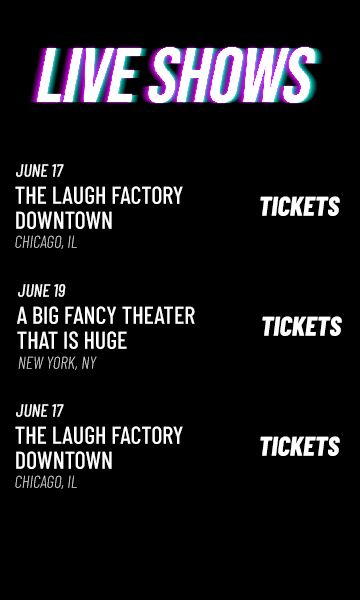
<style>
.page{position:relative;width:360px;height:600px;background:#000000}
.page>*{position:absolute;margin:0}
.t1{font:18px "BarlowCondensed-MediumItalic";color:#fafafa}
.t2{font:24px/25px "BarlowCondensed-Medium";color:#ffffff}
.t3{font:27px "BarlowCondensed-ExtraBoldItalic";color:#ffffff}
.t4{font:17px "BarlowCondensed-LightItalic";color:#d0d0d0}
</style>
<div class="page">
<p class="t1" style="left:16px;top:164px;width:48px;height:13px">JUNE 17</p>
<p class="t2" style="left:15px;top:186px;width:168px;height:43px">THE LAUGH FACTORY<br>DOWNTOWN</p>
<p class="t3" style="left:260px;top:196px;width:80px;height:20px">TICKETS</p>
<p class="t4" style="left:15px;top:235px;width:62px;height:14px">CHICAGO, IL</p>
<p class="t1" style="left:18px;top:284px;width:48px;height:13px">JUNE 19</p>
<p class="t2" style="left:17px;top:306px;width:178px;height:43px">A BIG FANCY THEATER<br>THAT IS HUGE</p>
<p class="t3" style="left:262px;top:316px;width:80px;height:20px">TICKETS</p>
<p class="t4" style="left:18px;top:356px;width:79px;height:14px">NEW YORK, NY</p>
<p class="t1" style="left:16px;top:404px;width:48px;height:13px">JUNE 17</p>
<p class="t2" style="left:15px;top:426px;width:168px;height:43px">THE LAUGH FACTORY<br>DOWNTOWN</p>
<p class="t3" style="left:260px;top:436px;width:80px;height:20px">TICKETS</p>
<p class="t4" style="left:15px;top:475px;width:62px;height:14px">CHICAGO, IL</p>
</div>
